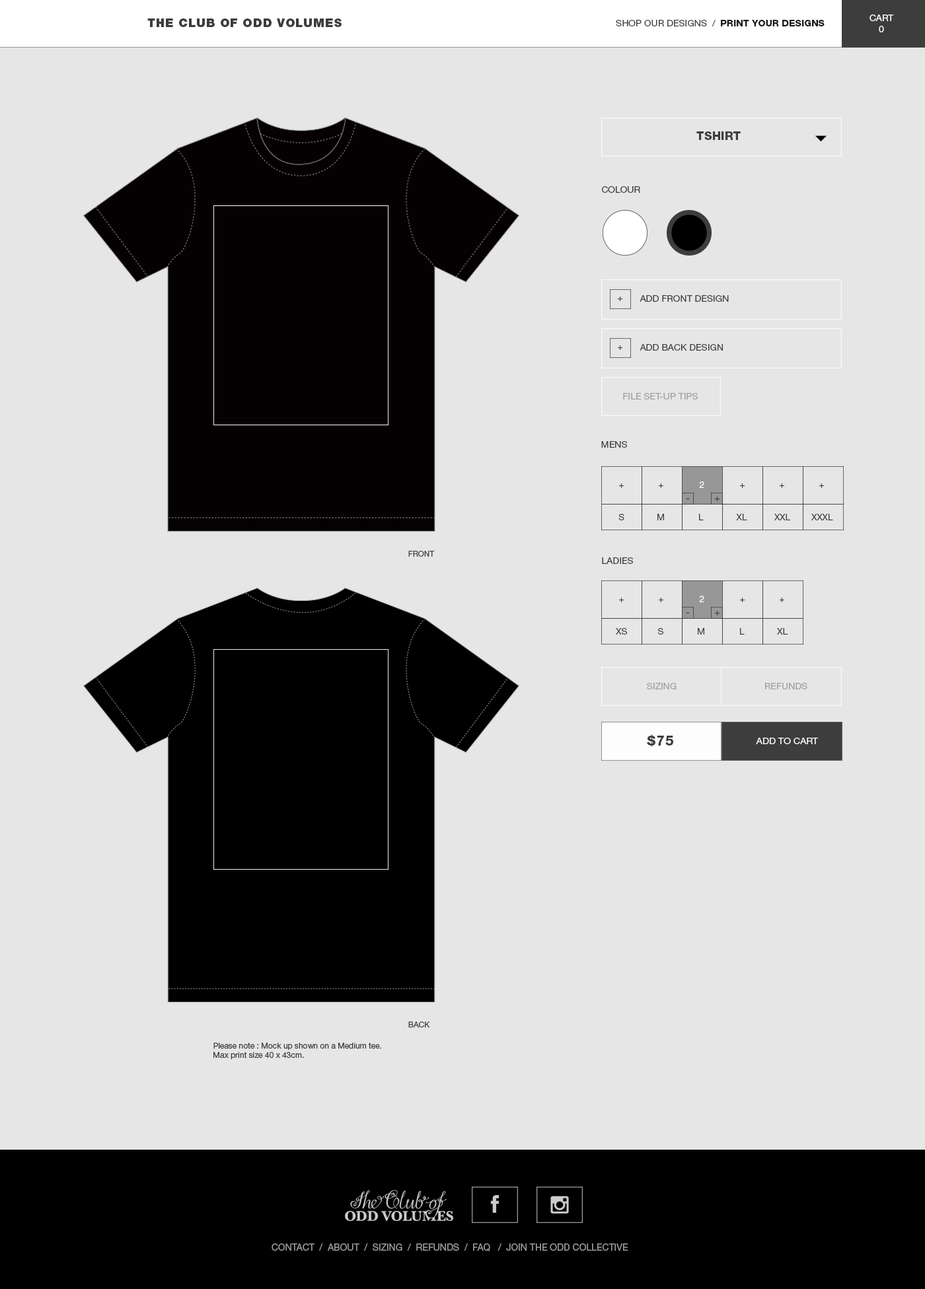
<style>
.page{position:relative;width:925px;height:1289px;background:#e6e6e6}
.page>*{position:absolute;margin:0}
.t1{font:9.2px "HelveticaNeueLTStd-Roman";color:#ffffff}
.t2{font:11.9px "HelveticaNeueLTStd-Blk";letter-spacing:0.05em;color:#3d3d3d}
.t3{font:9.2px "HelveticaNeueLTStd-Roman";color:#3d3d3d}
.t4{font:9.2px "HelveticaNeueLTStd-Hv";color:#1b1b1b}
.t5{font:11.9px "HelveticaNeueLTStd-Hv";color:#3d3d3d}
.t6{font:9.2px "HelveticaNeueLTStd-Roman";color:#3e3e3e}
.t7{font:9.1px "HelveticaNeueLTStd-Roman";color:#3e3e3e}
.t8{font:9.2px "HelveticaNeueLTStd-Roman";color:#a0a0a0}
.t9{font:9.1px "HelveticaNeueLTStd-Roman";color:#ffffff}
.t10{font:9.1px "HelveticaNeueLTStd-Roman";color:#3d3d3d}
.t11{font:7.9px "HelveticaNeueLTStd-Roman";color:#3e3e3e}
.t12{font:13.2px "HelveticaNeueLTStd-Hv";letter-spacing:0.05em;color:#3d3d3d}
.t13{font:9.2px "HelveticaNeueLTStd-Roman";color:#faf9f9}
.t14{font:9.5px "HelveticaNeueLTStd-Roman";color:#9b9b9b}
</style>
<div class="page">
<p class="t1" style="left:869px;top:15px;width:25px;height:17px;text-align:center">CART<br>0</p>
<p class="t2" style="left:147px;top:18px;width:195px;height:9px">THE CLUB OF ODD VOLUMES</p>
<p class="t3" style="left:616px;top:20px;width:208px;height:6px">SHOP OUR DESIGNS  /  <span class="t4">PRINT YOUR DESIGNS</span></p>
<p class="t5" style="left:696px;top:131px;width:44px;height:9px">TSHIRT</p>
<p class="t6" style="left:602px;top:186px;width:38px;height:7px">COLOUR</p>
<p class="t7" style="left:618px;top:297px;width:5px;height:4px">+</p>
<p class="t6" style="left:639px;top:295px;width:90px;height:7px">ADD FRONT DESIGN</p>
<p class="t7" style="left:618px;top:345px;width:5px;height:5px">+</p>
<p class="t6" style="left:639px;top:344px;width:84px;height:7px">ADD BACK DESIGN</p>
<p class="t8" style="left:623px;top:393px;width:75px;height:7px">FILE SET-UP TIPS</p>
<p class="t6" style="left:601px;top:441px;width:26px;height:7px">MENS</p>
<p class="t7" style="left:619px;top:484px;width:5px;height:4px">+</p>
<p class="t7" style="left:658px;top:484px;width:5px;height:4px">+</p>
<p class="t9" style="left:699px;top:482px;width:5px;height:6px">2</p>
<p class="t7" style="left:740px;top:484px;width:5px;height:4px">+</p>
<p class="t7" style="left:779px;top:484px;width:5px;height:4px">+</p>
<p class="t7" style="left:818px;top:484px;width:6px;height:4px">+</p>
<p class="t7" style="left:715px;top:497px;width:5px;height:4px">+</p>
<p class="t7" style="left:686px;top:498px;width:3px;height:1px">-</p>
<p class="t7" style="left:618px;top:514px;width:6px;height:7px">S</p>
<p class="t7" style="left:657px;top:514px;width:7px;height:7px">M</p>
<p class="t10" style="left:699px;top:514px;width:4px;height:7px">L</p>
<p class="t7" style="left:736px;top:514px;width:11px;height:7px">XL</p>
<p class="t7" style="left:774px;top:514px;width:17px;height:7px">XXL</p>
<p class="t7" style="left:811px;top:514px;width:22px;height:7px">XXXL</p>
<p class="t11" style="left:408px;top:551px;width:27px;height:6px">FRONT</p>
<p class="t6" style="left:602px;top:558px;width:31px;height:6px">LADIES</p>
<p class="t7" style="left:619px;top:598px;width:5px;height:4px">+</p>
<p class="t7" style="left:658px;top:598px;width:5px;height:4px">+</p>
<p class="t9" style="left:699px;top:596px;width:5px;height:6px">2</p>
<p class="t7" style="left:740px;top:598px;width:5px;height:4px">+</p>
<p class="t7" style="left:779px;top:598px;width:5px;height:4px">+</p>
<p class="t7" style="left:686px;top:612px;width:3px;height:2px">-</p>
<p class="t7" style="left:715px;top:611px;width:5px;height:5px">+</p>
<p class="t7" style="left:616px;top:628px;width:11px;height:7px">XS</p>
<p class="t7" style="left:658px;top:628px;width:5px;height:7px">S</p>
<p class="t10" style="left:698px;top:628px;width:6px;height:7px">M</p>
<p class="t7" style="left:740px;top:628px;width:4px;height:7px">L</p>
<p class="t7" style="left:777px;top:628px;width:11px;height:7px">XL</p>
<p class="t8" style="left:647px;top:683px;width:29px;height:7px">SIZING</p>
<p class="t8" style="left:765px;top:683px;width:42px;height:7px">REFUNDS</p>
<p class="t12" style="left:647px;top:735px;width:26px;height:12px">$75</p>
<p class="t13" style="left:756px;top:738px;width:62px;height:6px">ADD TO CART</p>
<p class="t11" style="left:408px;top:1022px;width:22px;height:6px">BACK</p>
<p class="t11" style="left:213px;top:1043px;width:168px;height:17px">Please note : Mock up shown on a Medium tee. <br>Max print size 40 x 43cm.</p>
<p class="t14" style="left:271px;top:1244px;width:357px;height:8px">CONTACT  /  ABOUT  /  SIZING  /  REFUNDS  /  FAQ   /  JOIN THE ODD COLLECTIVE</p>
</div>
